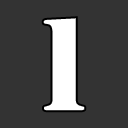
<style>
.page{position:relative;width:128px;height:128px;background:#333333}
.page>*{position:absolute;margin:0}
.t1{font:128px "StencilStd";color:#ffffff}
</style>
<div class="page">
<p class="t1" style="left:41px;top:16px;width:46px;height:97px">1</p>
</div>
